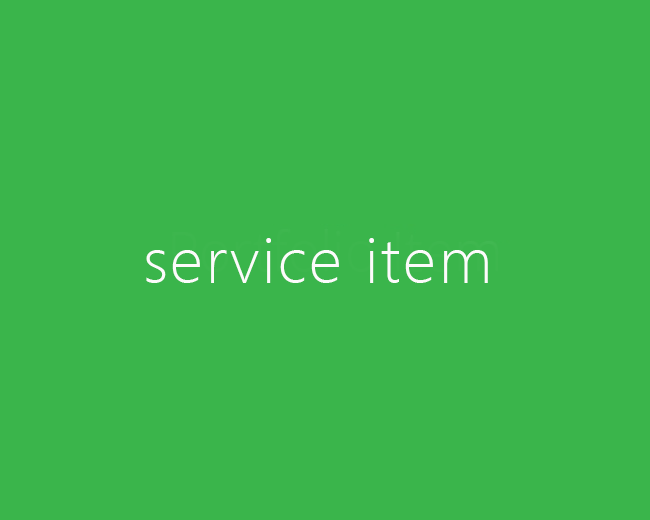
<style>
.page{position:relative;width:650px;height:520px;background:#3ab54b}
.page>*{position:absolute;margin:0}
.t1{font:60px "MicrosoftYaHeiUILight";letter-spacing:0.045em;color:#fcfbfb}
</style>
<div class="page">
<p class="t1" style="left:146px;top:238px;width:342px;height:45px">service item</p>
</div>
